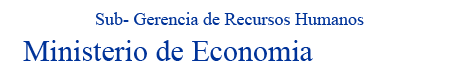
<style>
.page{position:relative;width:452px;height:82px;background:#ffffff}
.page>*{position:absolute;margin:0}
.t1{font:18px "TimesNewRomanPSMT";color:#003399}
.t2{font:14px "TimesNewRomanPSMT";color:#003399}
.t3{font:30px "TimesNewRomanPSMT";color:#003399}
</style>
<div class="page">
<p class="t1" style="left:23px;top:12px;width:341px;height:49px"><span class="t2">  </span>Sub- Gerencia de Recursos Humanos<br><span class="t3">Ministerio de Economia</span></p>
</div>
